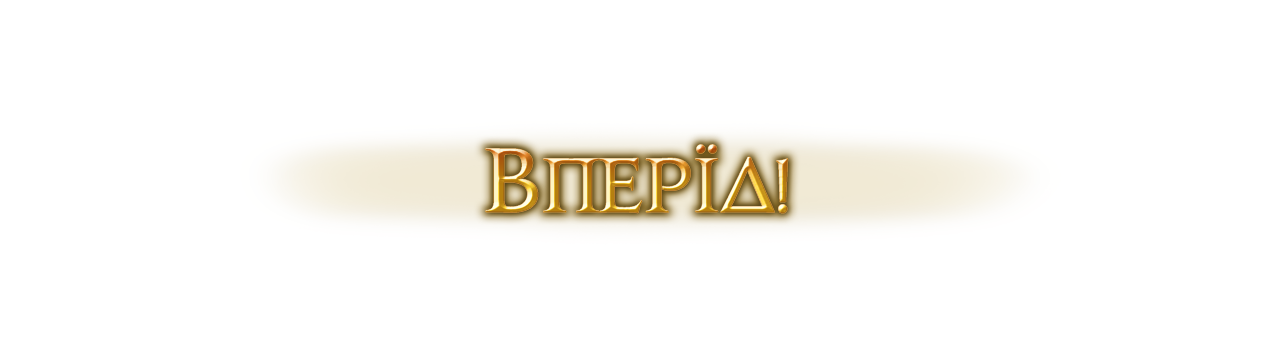
<style>
.page{position:relative;width:1280px;height:360px;background:#ffffff}
.page>*{position:absolute;margin:0}
.t1{font:69.3px "ACTIONLEARNED!-Bold"}
.t2{font:82.2px "ACTIONLEARNED!-Bold"}
</style>
<div class="page">
<p class="t1" style="left:485px;top:144px;width:303px;height:69px"><span class="t2">В</span>перёд!</p>
</div>
